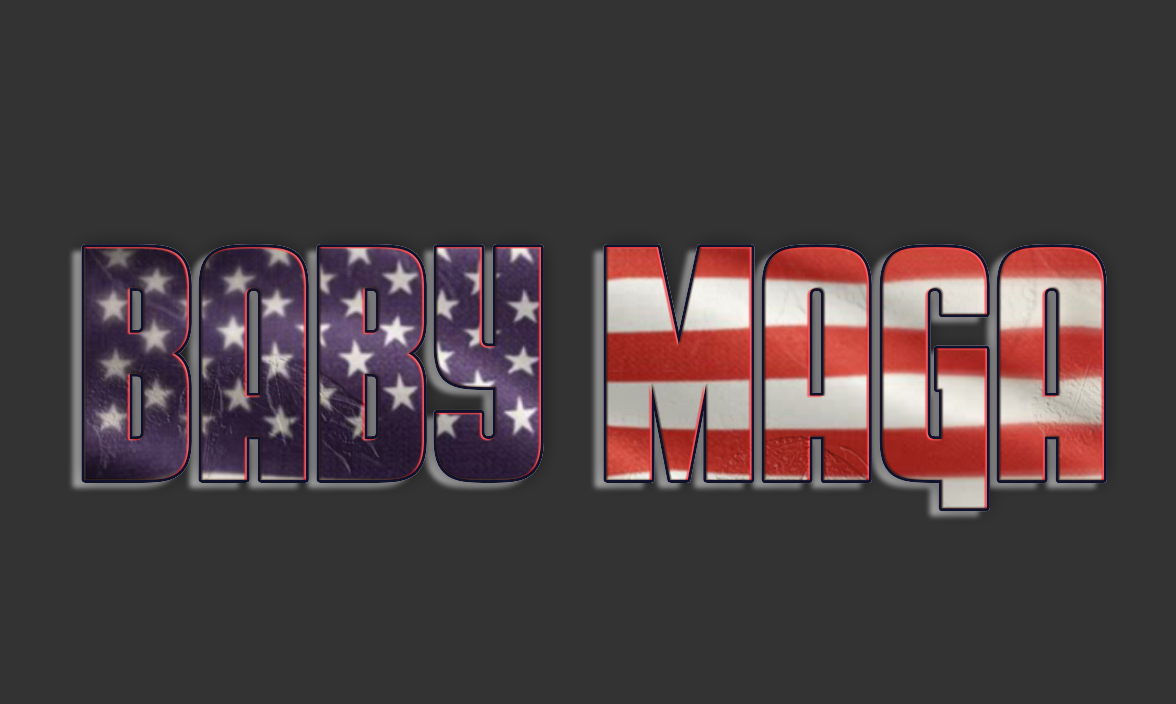
<style>
.page{position:relative;width:1176px;height:704px;background:#333333}
.page>*{position:absolute;margin:0}
.t1{font:327.2px "SpecialAgent"}
</style>
<div class="page">
<p class="t1" style="left:84px;top:247px;width:1020px;height:262px">BABY MAGA</p>
</div>
